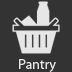
<style>
.page{position:relative;width:72px;height:72px;background:#333333}
.page>*{position:absolute;margin:0}
.t1{font:14px "MyriadPro-Regular";color:#e6e6e6}
</style>
<div class="page">
<p class="t1" style="left:19px;top:59px;width:37px;height:13px">Pantry</p>
</div>
